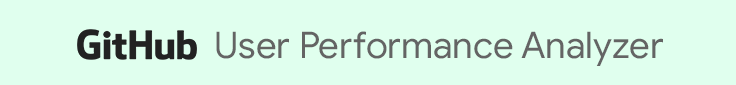
<style>
.page{position:relative;width:736px;height:85px;background:#e0ffee}
.page>*{position:absolute;margin:0}
.t1{font:36.7px "GoogleSans-Regular";color:#646464}
</style>
<div class="page">
<p class="t1" style="left:216px;top:31px;width:447px;height:35px">User Performance Analyzer</p>
</div>
